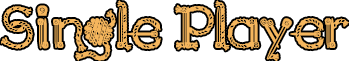
<style>
.page{position:relative;width:349px;height:61px;background:#ffffff}
.page>*{position:absolute;margin:0}
.t1{font:60px "KingthingsNeedles";color:#f5b65d}
</style>
<div class="page">
<p class="t1" style="left:1px;top:0px;width:348px;height:61px">Single Player</p>
</div>
